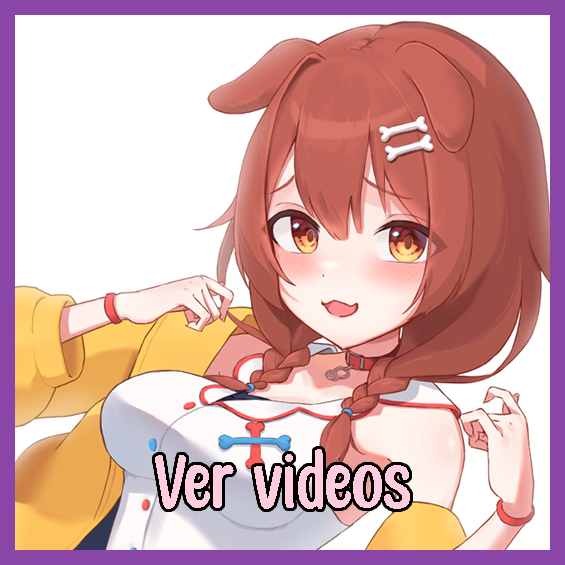
<style>
.page{position:relative;width:565px;height:565px;background:#ffffff}
.page>*{position:absolute;margin:0}
.t1{font:85.1px "HoneyNotes-Regular";color:#ffcddd}
</style>
<div class="page">
<p class="t1" style="left:155px;top:449px;width:255px;height:60px">Ver videos</p>
</div>
